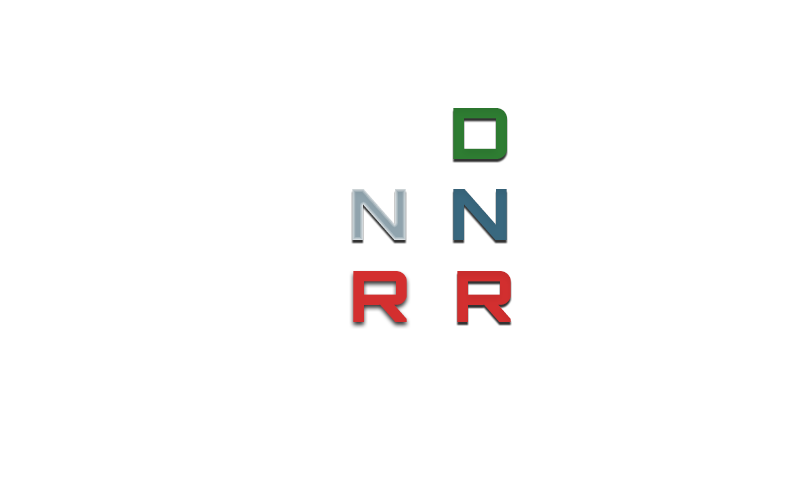
<style>
.page{position:relative;width:800px;height:480px;background:#ffffff}
.page>*{position:absolute;margin:0}
.t1{font:70.9px "Orbitron-ExtraBold";color:#2e7d32;scale:1.05 1}
.t2{font:70.9px "Orbitron-ExtraBold";color:#90a4ae;scale:1.05 1}
.t3{font:70.9px "Orbitron-ExtraBold";color:#39687f;scale:1.05 1}
.t4{font:70.9px "Orbitron-ExtraBold";color:#d32f2f;scale:1.05 1}
</style>
<div class="page">
<p class="t1" style="left:453px;top:108px;width:54px;height:51px">D</p>
<p class="t2" style="left:352px;top:189px;width:54px;height:51px">N</p>
<p class="t3" style="left:453px;top:189px;width:54px;height:51px">N</p>
<p class="t4" style="left:353px;top:271px;width:54px;height:51px">R</p>
<p class="t4" style="left:457px;top:271px;width:54px;height:51px">R</p>
</div>
